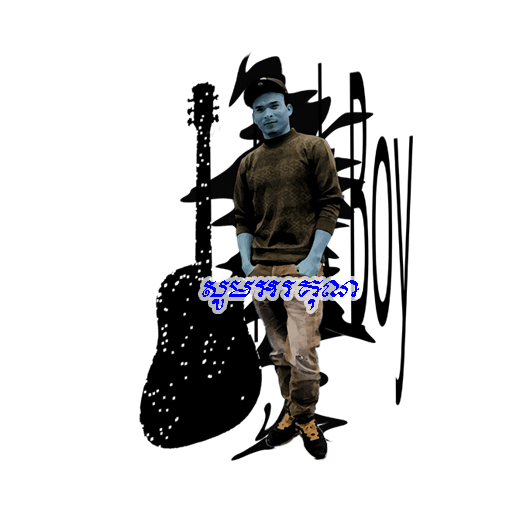
<style>
.page{position:relative;width:512px;height:512px;background:#ffffff}
.page>*{position:absolute;margin:0}
.t1{font:40.4px "AsvadekMokha";color:#0000ff;font-style:italic}
</style>
<div class="page">
<p class="t1" style="left:202px;top:280px;width:157px;height:30px">សូមអរគុណ</p>
</div>
